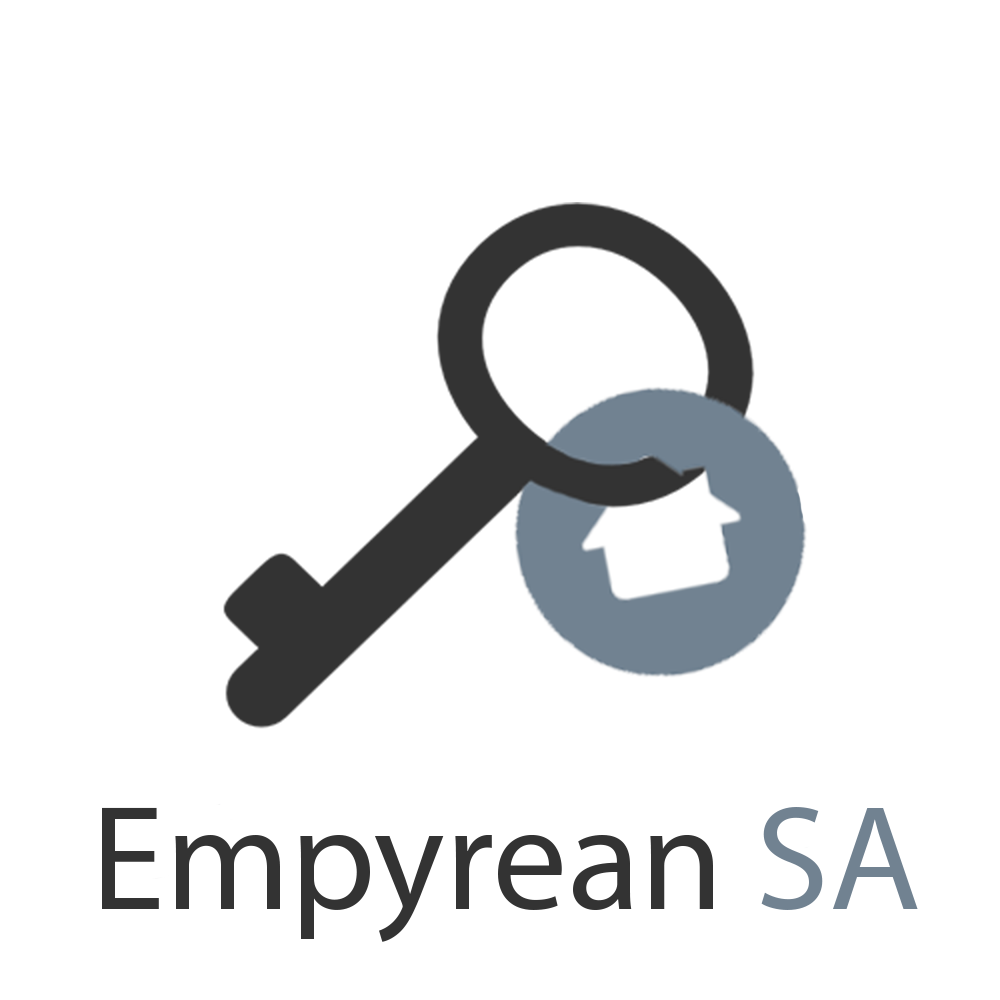
<style>
.page{position:relative;width:1000px;height:1000px;background:#ffffff}
.page>*{position:absolute;margin:0}
.t1{font:150px "MyriadPro-Regular";color:#333333}
.t2{font:150px "MyriadPro-Regular";color:#718291}
</style>
<div class="page">
<p class="t1" style="left:102px;top:807px;width:816px;height:135px">Empyrean <span class="t2">SA</span></p>
</div>
